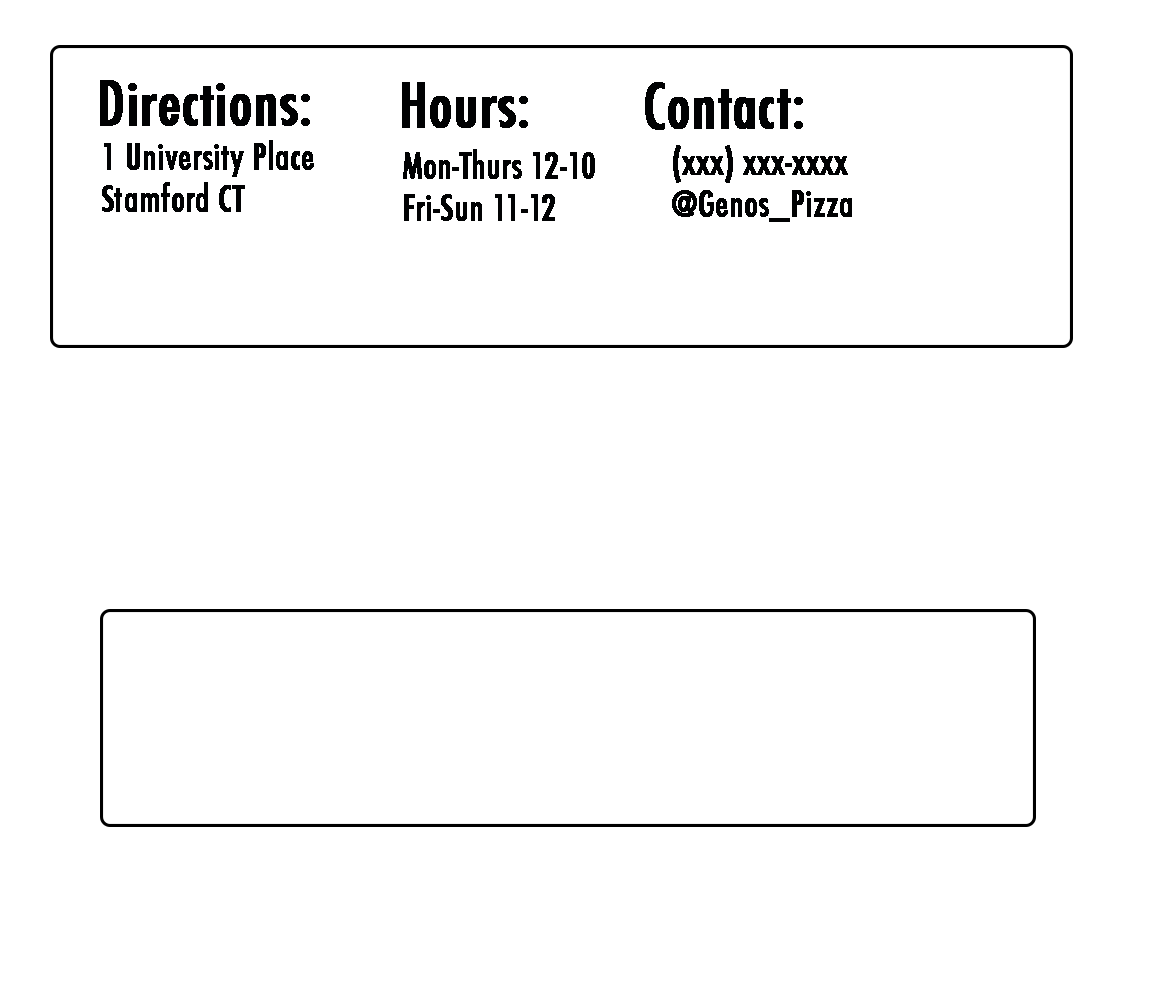
<style>
.page{position:relative;width:1152px;height:1008px;background:#ffffff}
.page>*{position:absolute;margin:0}
.t1{font:60px "Futura-CondensedMedium";color:#010203;font-weight:bold}
.t2{font:35px "Futura-CondensedMedium";color:#010203;font-weight:bold}
</style>
<div class="page">
<p class="t1" style="left:100px;top:80px;width:210px;height:46px">Directions:</p>
<p class="t1" style="left:402px;top:82px;width:126px;height:46px">Hours:</p>
<p class="t1" style="left:645px;top:82px;width:158px;height:48px">Contact:</p>
<p class="t2" style="left:102px;top:140px;width:212px;height:72px">1 University Place<br>Stamford CT</p>
<p class="t2" style="left:403px;top:149px;width:192px;height:72px">Mon-Thurs 12-10<br>Fri-Sun 11-12</p>
<p class="t2" style="left:672px;top:145px;width:180px;height:77px">(xxx) xxx-xxxx<br>@Genos_Pizza</p>
</div>
